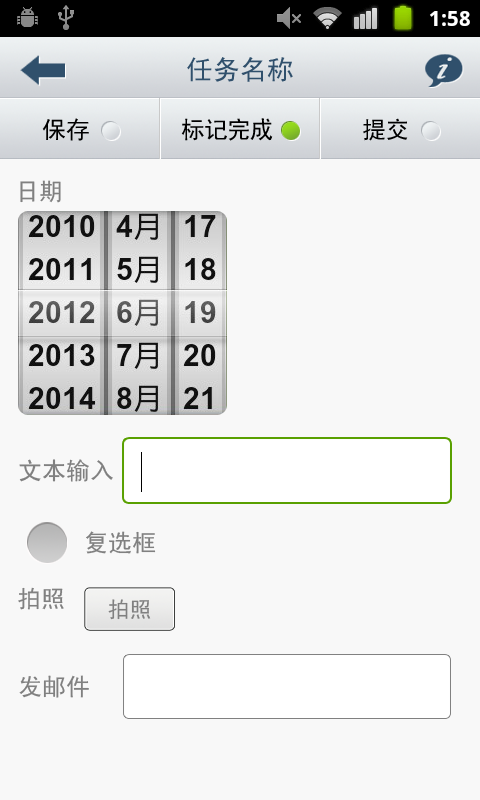
<style>
.page{position:relative;width:480px;height:800px;background:#f8f8f8}
.page>*{position:absolute;margin:0}
.t1{font:27px "SimHei";color:#30506c}
.t2{font:24px "SimHei";color:#000000;text-transform:uppercase}
.t3{font:24px "SimHei";color:#808080}
.t4{font:22px "SimHei";color:#808080}
</style>
<div class="page">
<p class="t1" style="left:187px;top:57px;width:106px;height:25px">任务名称</p>
<p class="t2" style="left:42px;top:118px;width:47px;height:23px">保存</p>
<p class="t2" style="left:181px;top:118px;width:92px;height:23px">标记完成</p>
<p class="t2" style="left:363px;top:118px;width:45px;height:23px">提交</p>
<p class="t3" style="left:20px;top:180px;width:41px;height:23px">日期</p>
<p class="t3" style="left:19px;top:459px;width:94px;height:23px">文本输入</p>
<p class="t3" style="left:86px;top:531px;width:70px;height:23px">复选框</p>
<p class="t3" style="left:18px;top:587px;width:46px;height:23px">拍照</p>
<p class="t4" style="left:108px;top:599px;width:43px;height:21px">拍照</p>
<p class="t3" style="left:19px;top:675px;width:70px;height:23px">发邮件</p>
</div>
